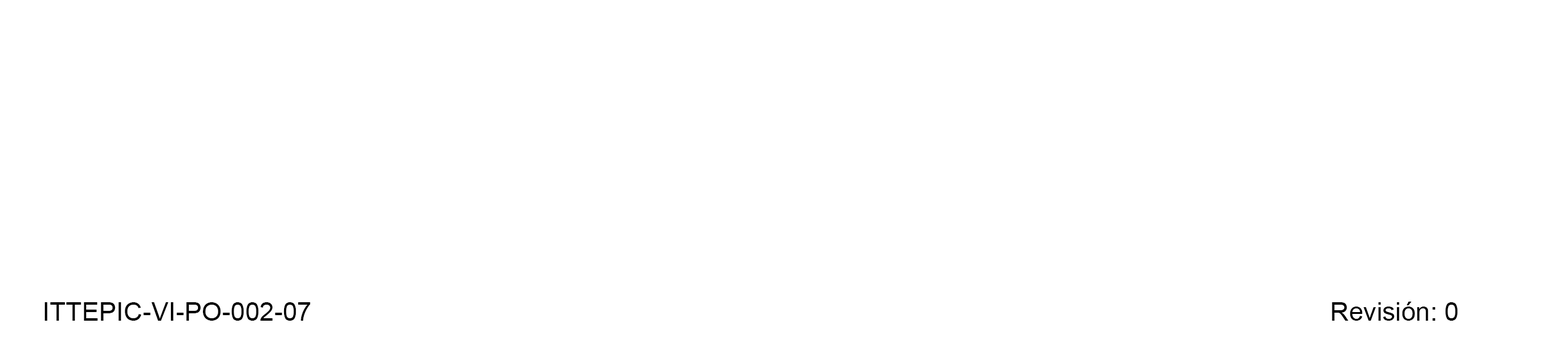
<style>
.page{position:relative;width:1568px;height:349px;background:#ffffff}
.page>*{position:absolute;margin:0}
.t1{font:26px "ArialMT";color:#000000}
</style>
<div class="page">
<p class="t1" style="left:44px;top:302px;width:267px;height:18px">ITTEPIC-VI-PO-002-07</p>
<p class="t1" style="left:1332px;top:301px;width:126px;height:19px">Revisión: 0</p>
</div>
